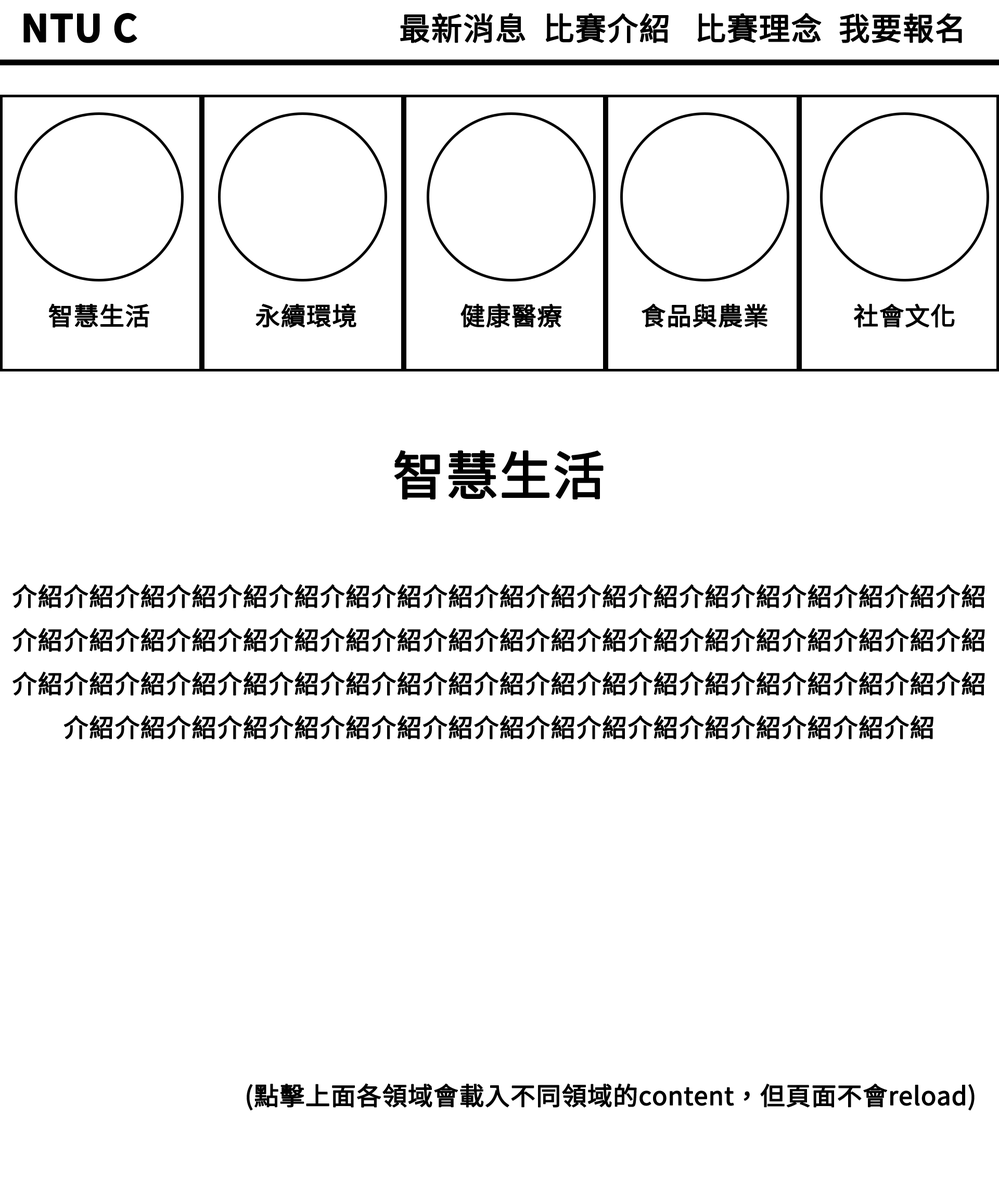
<style>
.page{position:relative;width:999px;height:1194px;background:#ffffff}
.page>*{position:absolute;margin:0}
.t1{font:37.5px "NotoSansCJKtc-Bold";color:#000000;font-weight:bold}
.t2{font:31.2px "NotoSansCJKtc-Regular";color:#000000;font-weight:bold}
.t3{font:25px "NotoSansCJKtc-Regular";color:#000000;font-weight:bold}
.t4{font:52px "NotoSansCJKtc-Regular";color:#000000;font-weight:bold}
</style>
<div class="page">
<p class="t1" style="left:23px;top:13px;width:114px;height:30px">NTU C</p>
<p class="t2" style="left:400px;top:12px;width:562px;height:31px">最新消息  比賽介紹   比賽理念  我要報名</p>
<p class="t3" style="left:49px;top:303px;width:100px;height:25px">智慧生活</p>
<p class="t3" style="left:255px;top:303px;width:101px;height:25px">永續環境</p>
<p class="t3" style="left:460px;top:303px;width:102px;height:25px">健康醫療</p>
<p class="t3" style="left:641px;top:303px;width:126px;height:25px">食品與農業</p>
<p class="t3" style="left:854px;top:303px;width:101px;height:25px">社會文化</p>
<p class="t3" style="left:12px;top:450px;width:973px;height:289px;text-align:center"><span class="t4">智慧生活<br></span><br>介紹介紹介紹介紹介紹介紹介紹介紹介紹介紹介紹介紹介紹介紹介紹介紹介紹介紹介紹介紹介紹介紹介紹介紹介紹介紹介紹介紹介紹介紹介紹介紹介紹介紹介紹介紹介紹介紹介紹介紹介紹介紹介紹介紹介紹介紹介紹介紹介紹介紹介紹介紹介紹介紹介紹介紹介紹介紹介紹介紹介紹介紹介紹介紹介紹介紹介紹介紹介紹介紹介紹介紹介紹介紹</p>
<p class="t3" style="left:247px;top:1083px;width:727px;height:28px">(點擊上面各領域會載入不同領域的content，但頁面不會reload)</p>
</div>
